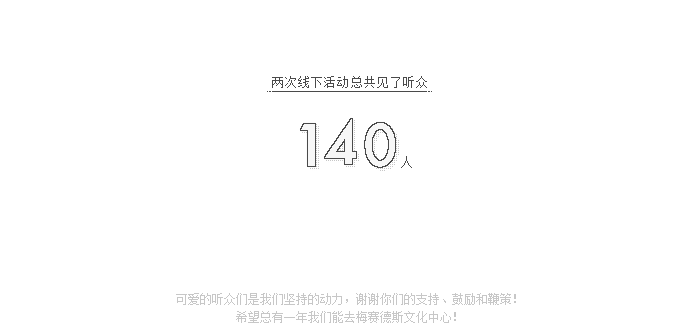
<style>
.page{position:relative;width:700px;height:326px;background:#ffffff}
.page>*{position:absolute;margin:0}
.t1{font:12px "FZXS12--GB1-0";letter-spacing:0.1em;color:#4a4a4a}
.t2{font:12px/17.6px "FZXS12--GB1-0";color:#c7c7c7}
</style>
<div class="page">
<p class="t1" style="left:272px;top:76px;width:155px;height:12px">两次线下活动总共见了听众</p>
<p class="t1" style="left:401px;top:156px;width:11px;height:12px">人</p>
<p class="t2" style="left:176px;top:293px;width:340px;height:30px;text-align:center">可爱的听众们是我们坚持的动力，谢谢你们的支持、鼓励和鞭策！<br>希望总有一年我们能去梅赛德斯文化中心！</p>
</div>
